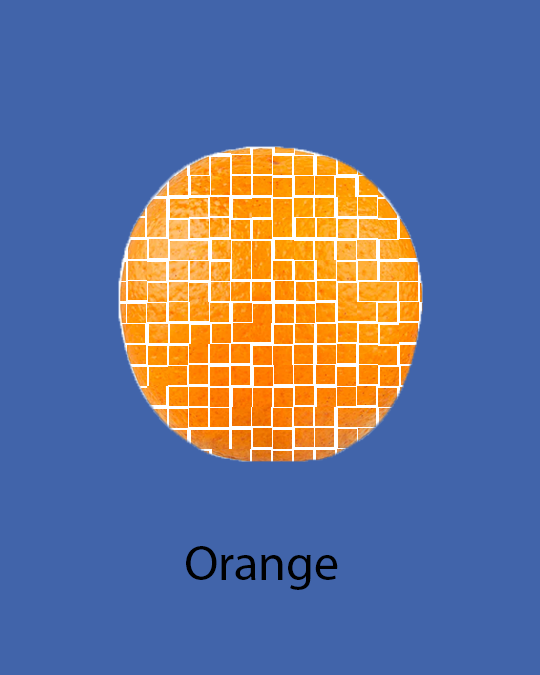
<style>
.page{position:relative;width:540px;height:675px;background:#4164aa}
.page>*{position:absolute;margin:0}
.t1{font:50px "MyriadPro-Regular";color:#000000}
</style>
<div class="page">
<p class="t1" style="left:186px;top:546px;width:152px;height:44px">Orange</p>
</div>
